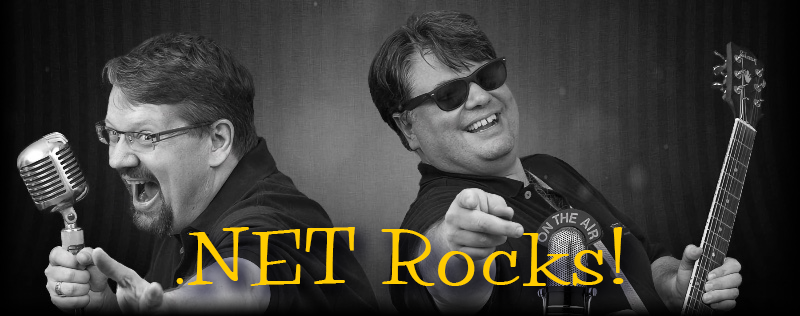
<style>
.page{position:relative;width:800px;height:316px}
.page>*{position:absolute;margin:0}
.t1{font:90px "Parade";color:#ffcc00}
</style>
<div class="page">
<p class="t1" style="left:176px;top:227px;width:448px;height:59px">.NET Rocks!</p>
</div>
